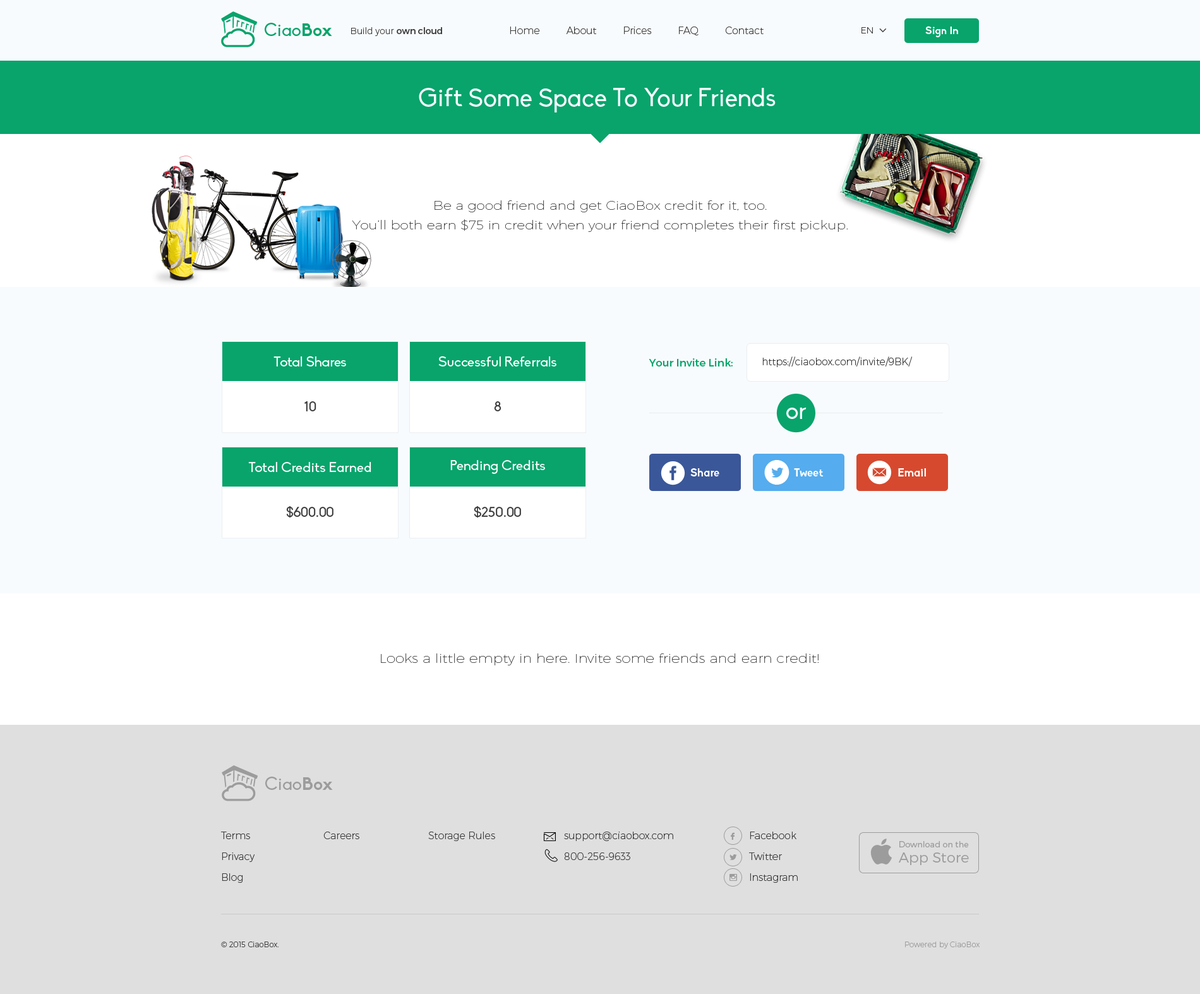
<style>
.page{position:relative;width:1200px;height:994px;background:#f8fbfd}
.page>*{position:absolute;margin:0}
.t1{font:17.7px "Biko";color:#08a46c}
.t2{font:17.7px "Biko-Bold";color:#08a46c}
.t3{font:8.8px "Montserrat-UltraLight";color:#3d3d3d}
.t4{font:8.8px "Montserrat-Regular";color:#3d3d3d}
.t5{font:10.1px "Montserrat-UltraLight";color:#3d3d3d}
.t6{font:10.7px "Biko-Bold";color:#ffffff}
.t7{font:25.3px "Biko";color:#f8fbfd}
.t8{font:12.1px/19.8px "Montserrat-Hairline";color:#3d3d3d;scale:1.15 1}
.t9{font:13.9px "Biko";color:#ffffff}
.t10{font:10.7px "Montserrat-Regular";color:#08a46c}
.t11{font:13.9px "Biko";color:#3d3d3d}
.t12{font:24px "Biko";color:#f8fbfd}
.t13{font:34.7px "Socialico";color:#ffffff}
.t14{font:11.4px "Biko-Bold";color:#ffffff}
.t15{font:12.6px "Montserrat-Hairline";color:#3d3d3d;scale:1.15 1}
.t16{font:17.7px "Biko";color:#9c9c9c}
.t17{font:17.7px "Biko-Bold";color:#9c9c9c}
.t18{font:10.1px/20.8px "Montserrat-UltraLight";color:#3d3d3d}
.t19{font:12px "Socialico";color:#9c9c9c;text-transform:uppercase}
.t20{font:8.2px/20.8px "Montserrat-Light";color:#9c9c9c}
.t21{font:14.3px/15.2px "Montserrat-Light";color:#9c9c9c}
.t22{font:7.6px "font2985";color:#9c9c9c}
.t23{font:7.6px "Montserrat-UltraLight";color:#3d3d3d}
.t24{font:7.6px "Montserrat-UltraLight";color:#9c9c9c}
</style>
<div class="page">
<p class="t1" style="left:265px;top:23px;width:67px;height:13px">Ciao<span class="t2">Box</span></p>
<p class="t3" style="left:351px;top:27px;width:91px;height:9px">Build your <span class="t4">own cloud</span></p>
<p class="t5" style="left:510px;top:27px;width:254px;height:8px">Home         About         Prices         FAQ         Contact</p>
<p class="t3" style="left:862px;top:27px;width:11px;height:6px">EN</p>
<p class="t6" style="left:925px;top:26px;width:33px;height:11px">Sign In</p>
<p class="t7" style="left:419px;top:88px;width:357px;height:24px">Gift Some Space To Your Friends</p>
<p class="t8" style="left:352px;top:200px;width:496px;height:32px;text-align:center">Be a good friend and get CiaoBox credit for it, too.<br>You’ll both earn $75 in credit when your friend completes their first pickup.</p>
<p class="t9" style="left:274px;top:356px;width:72px;height:10px">Total Shares</p>
<p class="t9" style="left:438px;top:356px;width:118px;height:10px">Successful Referrals</p>
<p class="t10" style="left:649px;top:358px;width:84px;height:8px">Your Invite Link:</p>
<p class="t5" style="left:762px;top:356px;width:150px;height:11px">https://ciaobox.com/invite/9BK/</p>
<p class="t11" style="left:304px;top:401px;width:12px;height:10px">10</p>
<p class="t11" style="left:494px;top:401px;width:8px;height:10px">8</p>
<p class="t12" style="left:786px;top:407px;width:21px;height:12px">or</p>
<p class="t9" style="left:248px;top:462px;width:123px;height:10px">Total Credits Earned</p>
<p class="t9" style="left:450px;top:460px;width:95px;height:14px">Pending Credits</p>
<p class="t13" style="left:764px;top:460px;width:26px;height:24px">l</p>
<p class="t14" style="left:690px;top:468px;width:29px;height:8px">Share</p>
<p class="t14" style="left:794px;top:468px;width:30px;height:8px">Tweet</p>
<p class="t14" style="left:898px;top:468px;width:28px;height:8px">Email</p>
<p class="t11" style="left:286px;top:506px;width:48px;height:11px">$600.00</p>
<p class="t11" style="left:474px;top:506px;width:47px;height:11px">$250.00</p>
<p class="t15" style="left:381px;top:653px;width:438px;height:12px">Looks a little empty in here. Invite some friends and earn credit!</p>
<p class="t16" style="left:265px;top:776px;width:68px;height:14px">Ciao<span class="t17">Box</span></p>
<p class="t18" style="left:221px;top:831px;width:34px;height:51px">Terms<br>Privacy<br>Blog</p>
<p class="t5" style="left:323px;top:831px;width:36px;height:8px">Careers</p>
<p class="t5" style="left:428px;top:831px;width:67px;height:10px">Storage Rules</p>
<p class="t18" style="left:564px;top:831px;width:109px;height:29px">support@ciaobox.com<br>800-256-9633</p>
<p class="t19" style="left:730px;top:832px;width:5px;height:7px">F</p>
<p class="t18" style="left:749px;top:831px;width:49px;height:51px">Facebook<br>Twitter<br>Instagram</p>
<p class="t20" style="left:899px;top:841px;width:70px;height:24px">Download on the<br><span class="t21">App Store</span></p>
<p class="t19" style="left:730px;top:854px;width:7px;height:6px">L</p>
<p class="t22" style="left:730px;top:874px;width:7px;height:7px">x</p>
<p class="t23" style="left:221px;top:941px;width:58px;height:6px">© 2015 CiaoBox.</p>
<p class="t24" style="left:905px;top:941px;width:75px;height:7px">Powered by CiaoBox</p>
</div>
